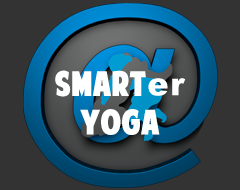
<style>
.page{position:relative;width:240px;height:190px;background:#333333}
.page>*{position:absolute;margin:0}
.t1{font:32px "AmericanPurposeSTRIPE1Normal";letter-spacing:0.05em;color:#feffff}
.t2{font:32px "Arial-Black";letter-spacing:0.05em;color:#feffff}
</style>
<div class="page">
<p class="t1" style="left:55px;top:70px;width:131px;height:65px;text-align:center">SMART<span class="t2">er<br></span>yoga</p>
</div>
